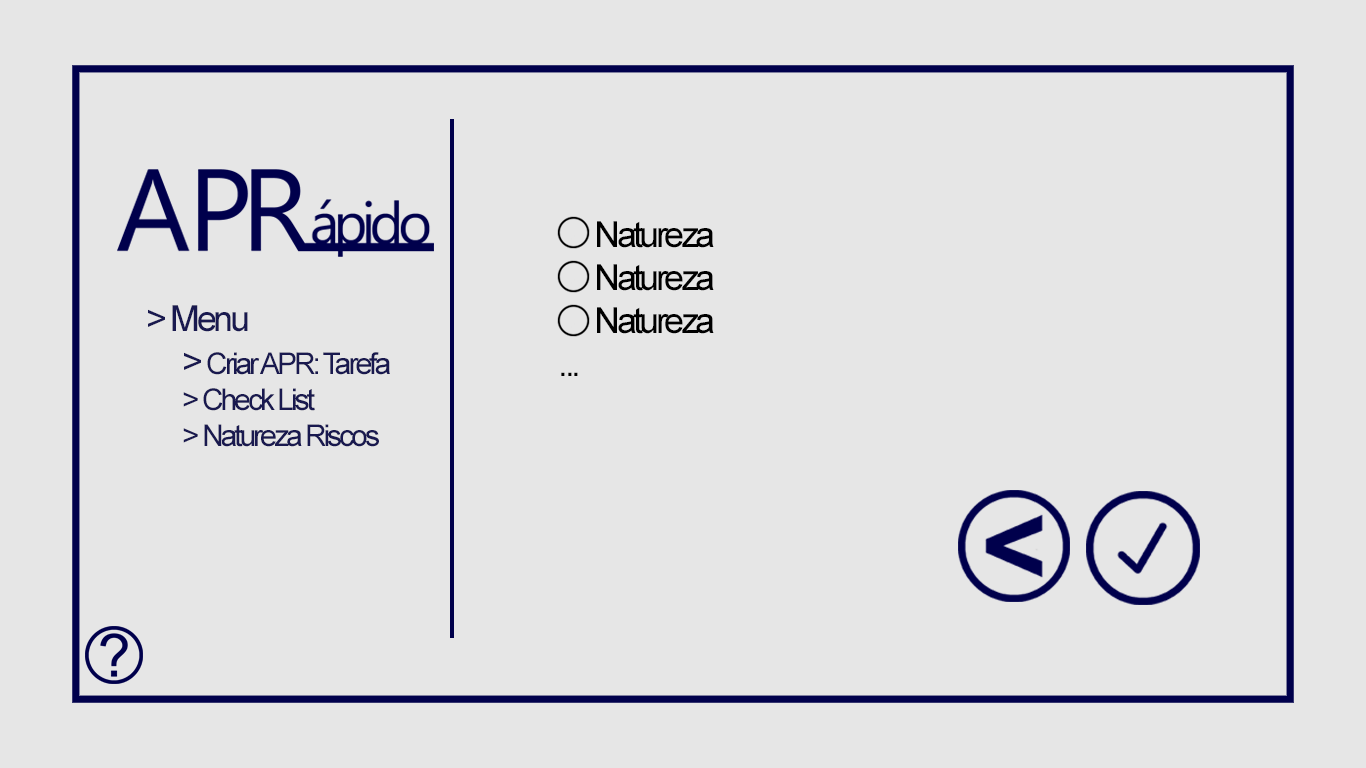
<style>
.page{position:relative;width:1366px;height:768px;background:#e6e6e6}
.page>*{position:absolute;margin:0}
.t1{font:36px "ArialMT";letter-spacing:-0.1em;color:#000000}
.t2{font:30px "ArialMT";letter-spacing:-0.1em;color:#19194f}
.t3{font:36px "ArialMT";letter-spacing:-0.095em;color:#19194f}
</style>
<div class="page">
<p class="t1" style="left:561px;top:221px;width:153px;height:155px">Natureza<br> Natureza<br> Natureza<br>...</p>
<p class="t2" style="left:148px;top:305px;width:242px;height:142px"><span class="t3">&gt; Menu<br> &gt; </span>Criar APR: Tarefa<br> &gt; Check List<br> &gt; Natureza Riscos</p>
</div>
